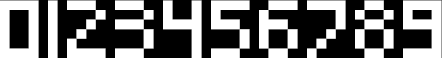
<style>
.page{position:relative;width:442px;height:58px;background:#000000}
.page>*{position:absolute;margin:0}
.t1{font:48px "Pixeled";color:#ffffff}
</style>
<div class="page">
<p class="t1" style="left:0px;top:0px;width:442px;height:58px">0123456789</p>
</div>
